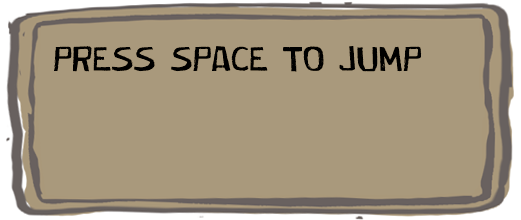
<style>
.page{position:relative;width:521px;height:220px;background:#a9997c}
.page>*{position:absolute;margin:0}
.t1{font:42.3px "Cordelina";color:#000000}
</style>
<div class="page">
<p class="t1" style="left:54px;top:46px;width:368px;height:26px">press space to jump</p>
</div>
